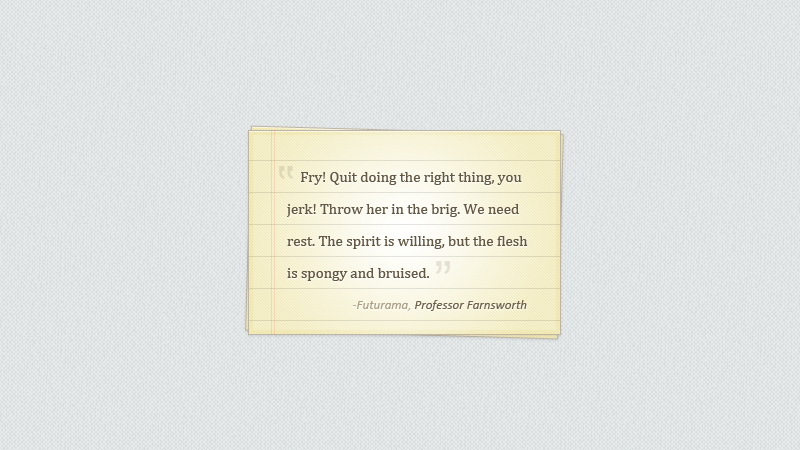
<style>
.page{position:relative;width:800px;height:450px}
.page>*{position:absolute;margin:0}
.t1{font:55px "ArialMT";color:#e2dbb9}
.t2{font:15px/32px "Cambria";color:#635843}
.t3{font:55px "ArialMT";color:#e5e2d4}
.t4{font:13px "Calibri-Italic";color:#6e624b}
.t5{font:13px "Calibri-Italic";color:#beb29a}
.t6{font:13px "Calibri-Italic";color:#ab9f86}
</style>
<div class="page">
<p class="t1" style="left:279px;top:166px;width:14px;height:13px;rotate:180deg">„</p>
<p class="t2" style="left:287px;top:172px;width:241px;height:109px">Fry! Quit doing the right thing, you jerk! Throw her in the brig. We need rest. The spirit is willing, but the flesh is spongy and bruised.</p>
<p class="t3" style="left:436px;top:261px;width:14px;height:13px">„</p>
<p class="t4" style="left:352px;top:300px;width:175px;height:11px"><span class="t5">-</span><span class="t6">Futurama</span><span class="t5">, </span>Professor Farnsworth</p>
</div>
